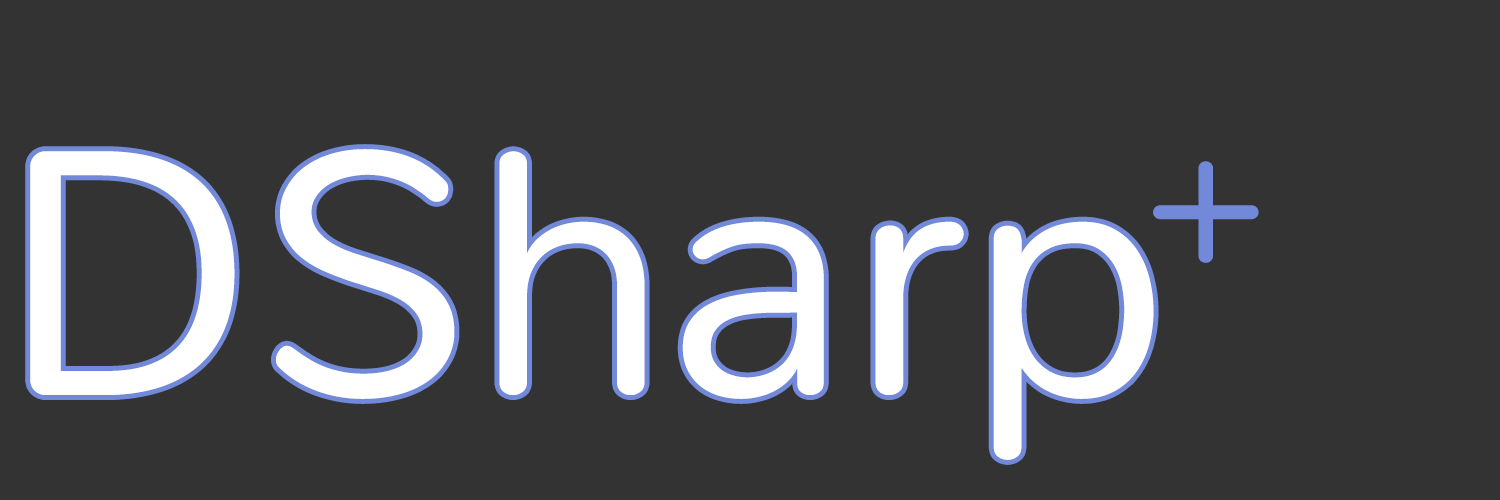
<style>
.page{position:relative;width:1500px;height:500px;background:#333333}
.page>*{position:absolute;margin:0}
.t1{font:350px "Nunito-Light";color:#ffffff}
.t2{font:209.9px "Nunito-Light";color:#7289da}
</style>
<div class="page">
<p class="t1" style="left:30px;top:149px;width:1124px;height:311px">DSharp</p>
<p class="t2" style="left:1153px;top:161px;width:106px;height:102px">+</p>
</div>
